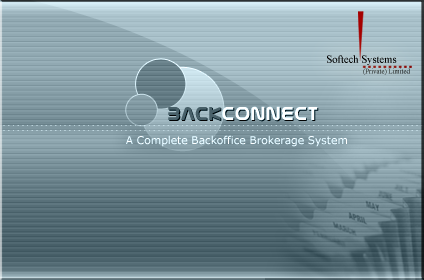
<style>
.page{position:relative;width:424px;height:280px}
.page>*{position:absolute;margin:0}
.t1{font:10.6px "TimesNewRomanPSMT";color:#000000}
.t2{font:6.8px "TimesNewRomanPSMT"}
.t3{font:21.9px "Nasalization";letter-spacing:0.05em;color:#ffffff}
.t4{font:21.9px "Nasalization";letter-spacing:0.05em;color:#5a5a5a}
.t5{font:10.7px "Verdana";color:#ffffff}
</style>
<div class="page">
<p class="t1" style="left:327px;top:55px;width:70px;height:10px">Softech Systems</p>
<p class="t2" style="left:363px;top:68px;width:47px;height:7px">(Private) Limited</p>
<p class="t3" style="left:168px;top:106px;width:150px;height:15px"><span class="t4">Back</span>connect</p>
<p class="t5" style="left:126px;top:135px;width:221px;height:12px">A Complete Backoffice Brokerage System</p>
</div>
